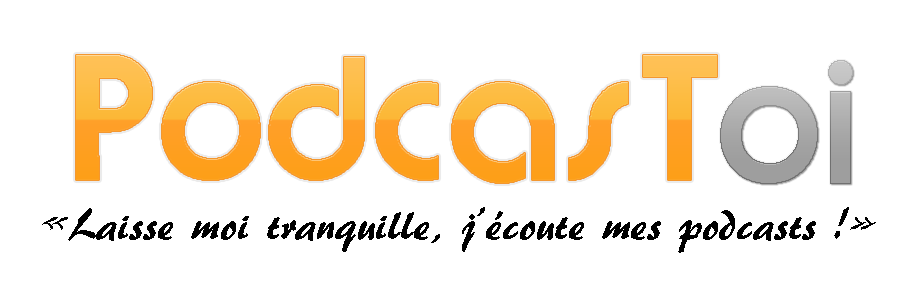
<style>
.page{position:relative;width:900px;height:300px;background:#ffffff}
.page>*{position:absolute;margin:0}
.t1{font:150px "Brandish"}
.t2{font:150px "Brandish";color:#a5a5a5}
.t3{font:45px "ARBERKLEY";color:#000000}
</style>
<div class="page">
<p class="t1" style="left:76px;top:55px;width:641px;height:128px">PodcasT</p>
<p class="t2" style="left:720px;top:60px;width:133px;height:124px">oi</p>
<p class="t3" style="left:42px;top:207px;width:834px;height:46px">«Laisse moi tranquille, j’écoute mes podcasts !»</p>
</div>
